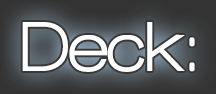
<style>
.page{position:relative;width:216px;height:94px}
.page>*{position:absolute;margin:0}
.t1{font:72px "WalkwayUltraBold";color:#ffffff}
</style>
<div class="page">
<p class="t1" style="left:22px;top:22px;width:173px;height:50px">Deck:</p>
</div>
